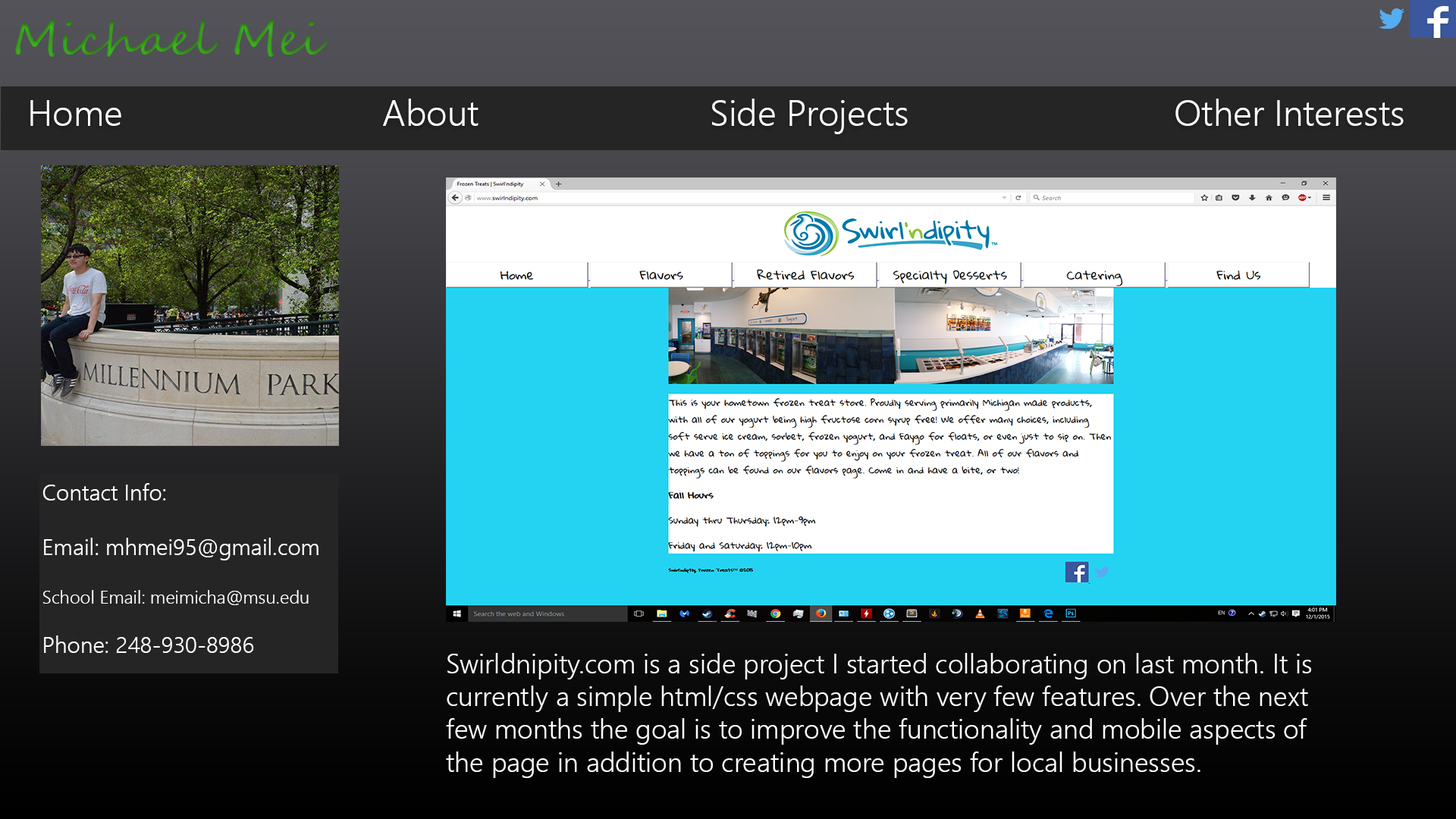
<style>
.page{position:relative;width:1456px;height:819px}
.page>*{position:absolute;margin:0}
.t1{font:45.5px "SegoeScript";color:#369b19}
.t2{font:36.4px "SegoeUI-Semilight";color:#fefeff}
.t3{font:22.7px "SegoeUI-Semilight";color:#ffffff}
.t4{font:18.2px "SegoeUI-Semilight";color:#ffffff}
.t5{font:27.3px "SegoeUI-Semilight";color:#fefeff}
</style>
<div class="page">
<p class="t1" style="left:15px;top:19px;width:314px;height:38px">Michael Mei</p>
<p class="t2" style="left:30px;top:99px;width:1374px;height:35px">Home          About         Side Projects          Other Interests</p>
<p class="t3" style="left:42px;top:483px;width:276px;height:170px">Contact Info:<br><br>Email: mhmei95@gmail.com<br><br><span class="t4">School Email: meimicha@msu.edu<br><br></span>Phone: 248-930-8986</p>
<p class="t5" style="left:446px;top:653px;width:865px;height:125px">Swirldnipity.com is a side project I started collaborating on last month. It is currently a simple html/css webpage with very few features. Over the next few months the goal is to improve the functionality and mobile aspects of the page in addition to creating more pages for local businesses.</p>
</div>
